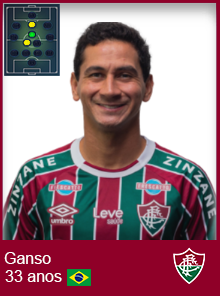
<style>
.page{position:relative;width:220px;height:296px;background:#ffffff}
.page>*{position:absolute;margin:0}
.t1{font:16px "ArialMT";color:#ffffff}
</style>
<div class="page">
<p class="t1" style="left:4px;top:252px;width:47px;height:12px">Ganso</p>
<p class="t1" style="left:5px;top:270px;width:57px;height:12px">33 anos</p>
</div>
